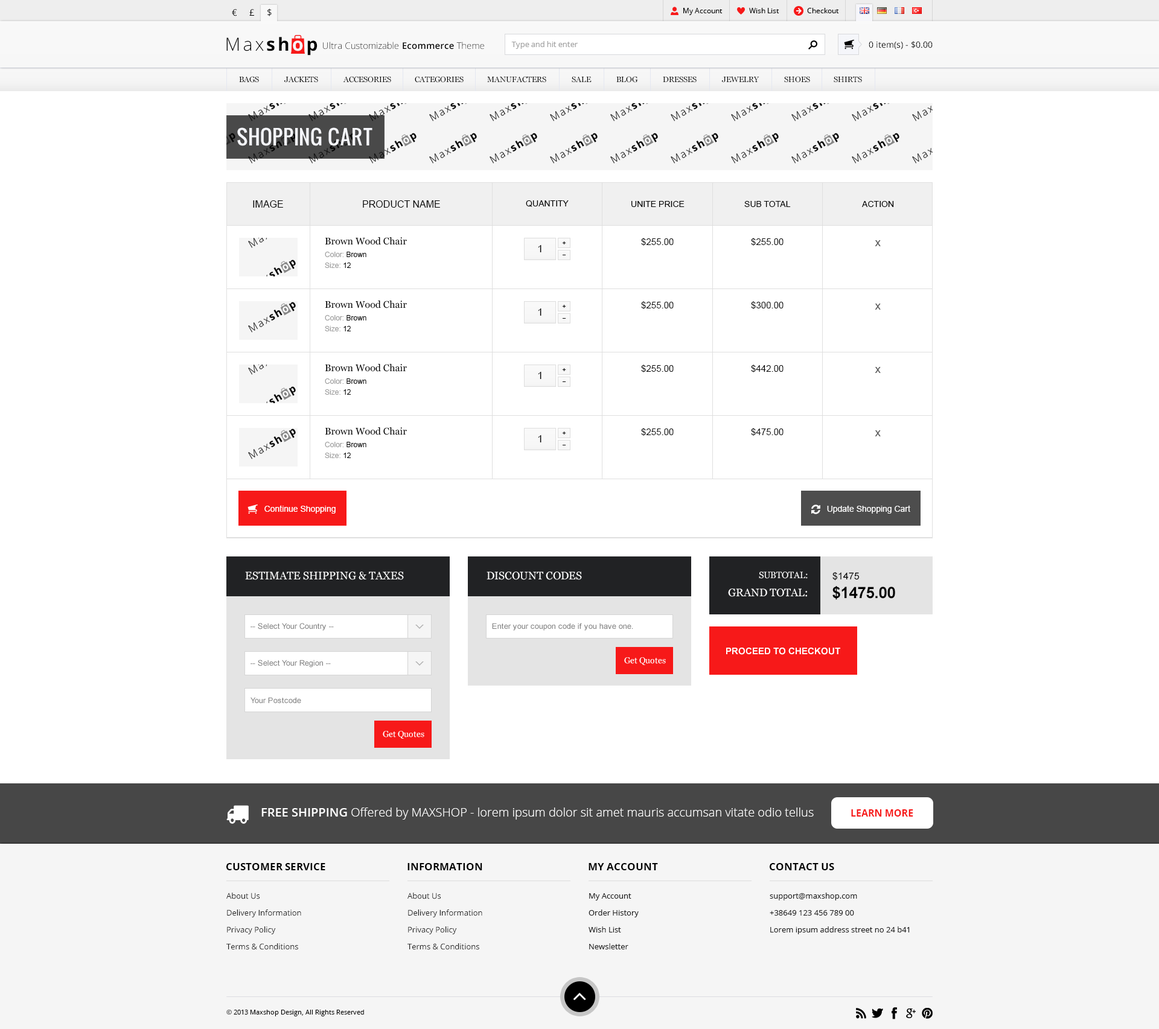
<style>
.page{position:relative;width:1159px;height:1029px;background:#ffffff}
.page>*{position:absolute;margin:0}
.t1{font:9.1px "OpenSans";color:#000000}
.t2{font:7.2px "OpenSans";color:#000000}
.t3{font:18.1px "OpenSans-Light";letter-spacing:0.14em;color:#000000}
.t4{font:18.1px "OpenSans-Bold";letter-spacing:0.14em;color:#000000}
.t5{font:18.1px "OpenSans-Bold";letter-spacing:0.14em;color:#f6f6fa}
.t6{font:9.1px "OpenSans-Light";color:#000000}
.t7{font:9.1px "OpenSans-Semibold";color:#000000}
.t8{font:7.8px "OpenSans";color:#a2a2a2}
.t9{font:8.4px "OpenSans";color:#000000}
.t10{font:7.8px "Georgia";color:#000000;text-transform:uppercase}
.t11{font:19.9px "Oswald";color:#f5f6fb}
.t12{font:9.7px "ArialMT";color:#000000;text-transform:uppercase}
.t13{font:8.4px "ArialMT";color:#000000;text-transform:uppercase}
.t14{font:9.7px "Georgia";color:#000000}
.t15{font:10.3px "ArialMT";color:#000000}
.t16{font:7.2px "ArialMT";color:#000000}
.t17{font:9.1px "ArialMT";color:#000000}
.t18{font:11.5px "ArialMT";color:#595959}
.t19{font:7.2px/10.9px "ArialMT";color:#9d9d9d}
.t20{font:7.2px/10.9px "ArialMT";color:#000000}
.t21{font:8.4px "ArialMT";color:#ffffff}
.t22{font:10.9px "Georgia";color:#ffffff;text-transform:uppercase}
.t23{font:9.1px "Georgia";color:#ffffff;text-transform:uppercase}
.t24{font:9.7px "ArialMT";color:#000000}
.t25{font:15.7px "Arial-BoldMT";color:#000000}
.t26{font:7.8px "ArialMT";color:#808080}
.t27{font:9.1px "Arial-BoldMT";color:#ffffff;text-transform:uppercase}
.t28{font:8.4px "Georgia";color:#ffffff}
.t29{font:12.1px "OpenSans-Light";color:#ffffff}
.t30{font:12.1px "OpenSans-Semibold";color:#ffffff}
.t31{font:9.7px "OpenSans-Bold";color:#f71919;text-transform:uppercase}
.t32{font:10.3px "OpenSans-Bold";color:#000000;text-transform:uppercase}
.t33{font:7.8px/16.9px "OpenSans";color:#1c1c1c}
.t34{font:6.6px "OpenSans";color:#000000}
</style>
<div class="page">
<p class="t1" style="left:232px;top:8px;width:40px;height:8px">€     £     $</p>
<p class="t2" style="left:683px;top:8px;width:39px;height:7px">My Account</p>
<p class="t2" style="left:749px;top:8px;width:30px;height:5px">Wish List</p>
<p class="t2" style="left:807px;top:8px;width:32px;height:5px">Checkout</p>
<p class="t3" style="left:226px;top:37px;width:91px;height:19px">Max<span class="t4">sh</span><span class="t5">o</span><span class="t4">p</span></p>
<p class="t6" style="left:323px;top:42px;width:161px;height:7px">Ultra Customizable <span class="t7">Ecommerce</span> Theme</p>
<p class="t8" style="left:511px;top:41px;width:67px;height:8px">Type and hit enter</p>
<p class="t9" style="left:868px;top:41px;width:64px;height:8px">0 item(s) - $0.00</p>
<p class="t10" style="left:239px;top:76px;width:623px;height:7px">BAGS              Jackets              ACCESORIES             CATEGORIES             Manufacters              Sale              Blog              Dresses              Jewelry              SHOES             SHirts</p>
<p class="t11" style="left:237px;top:127px;width:135px;height:19px">SHOPPING CART</p>
<p class="t12" style="left:253px;top:200px;width:30px;height:8px">Image</p>
<p class="t12" style="left:363px;top:200px;width:77px;height:8px">Product Name</p>
<p class="t13" style="left:526px;top:200px;width:43px;height:7px">Quantity</p>
<p class="t13" style="left:631px;top:201px;width:53px;height:6px">Unite Price</p>
<p class="t13" style="left:744px;top:201px;width:47px;height:6px">Sub Total</p>
<p class="t13" style="left:862px;top:201px;width:32px;height:6px">Action</p>
<p class="t14" style="left:325px;top:237px;width:82px;height:8px">Brown Wood Chair</p>
<p class="t15" style="left:538px;top:245px;width:3px;height:7px">1</p>
<p class="t16" style="left:562px;top:241px;width:4px;height:3px">+</p>
<p class="t17" style="left:641px;top:238px;width:33px;height:8px">$255.00</p>
<p class="t17" style="left:751px;top:238px;width:32px;height:8px">$255.00</p>
<p class="t18" style="left:875px;top:240px;width:6px;height:6px">x</p>
<p class="t19" style="left:325px;top:252px;width:41px;height:16px">Color: <span class="t20">Brown<br></span>Size: <span class="t20">12</span></p>
<p class="t14" style="left:325px;top:300px;width:82px;height:8px">Brown Wood Chair</p>
<p class="t16" style="left:562px;top:305px;width:4px;height:3px">+</p>
<p class="t17" style="left:641px;top:301px;width:33px;height:8px">$255.00</p>
<p class="t17" style="left:751px;top:301px;width:32px;height:8px">$300.00</p>
<p class="t18" style="left:875px;top:304px;width:6px;height:6px">x</p>
<p class="t19" style="left:325px;top:315px;width:41px;height:16px">Color: <span class="t20">Brown<br></span>Size: <span class="t20">12</span></p>
<p class="t15" style="left:538px;top:308px;width:3px;height:8px">1</p>
<p class="t14" style="left:325px;top:363px;width:82px;height:9px">Brown Wood Chair</p>
<p class="t17" style="left:641px;top:365px;width:33px;height:7px">$255.00</p>
<p class="t17" style="left:751px;top:365px;width:32px;height:7px">$442.00</p>
<p class="t15" style="left:538px;top:372px;width:3px;height:7px">1</p>
<p class="t16" style="left:562px;top:368px;width:4px;height:3px">+</p>
<p class="t18" style="left:875px;top:367px;width:6px;height:6px">x</p>
<p class="t19" style="left:325px;top:378px;width:41px;height:17px">Color: <span class="t20">Brown<br></span>Size: <span class="t20">12</span></p>
<p class="t14" style="left:325px;top:427px;width:82px;height:8px">Brown Wood Chair</p>
<p class="t15" style="left:538px;top:435px;width:3px;height:7px">1</p>
<p class="t16" style="left:562px;top:432px;width:4px;height:3px">+</p>
<p class="t17" style="left:641px;top:428px;width:33px;height:8px">$255.00</p>
<p class="t17" style="left:751px;top:428px;width:32px;height:8px">$475.00</p>
<p class="t18" style="left:875px;top:430px;width:6px;height:6px">x</p>
<p class="t19" style="left:325px;top:442px;width:41px;height:16px">Color: <span class="t20">Brown<br></span>Size: <span class="t20">12</span></p>
<p class="t21" style="left:264px;top:505px;width:72px;height:9px">Continue Shopping</p>
<p class="t21" style="left:827px;top:505px;width:83px;height:9px">Update Shopping Cart</p>
<p class="t22" style="left:245px;top:572px;width:159px;height:8px">Estimate Shipping &amp; Taxes</p>
<p class="t22" style="left:486px;top:572px;width:96px;height:8px">Discount Codes</p>
<p class="t23" style="left:759px;top:572px;width:49px;height:7px">Subtotal:</p>
<p class="t24" style="left:832px;top:572px;width:27px;height:9px">$1475</p>
<p class="t22" style="left:728px;top:588px;width:79px;height:9px">Grand total:</p>
<p class="t25" style="left:832px;top:586px;width:63px;height:14px">$1475.00</p>
<p class="t26" style="left:250px;top:623px;width:84px;height:8px">-- Select Your Country --</p>
<p class="t26" style="left:492px;top:623px;width:141px;height:8px">Enter your coupon code if you have one.</p>
<p class="t27" style="left:726px;top:648px;width:114px;height:7px">Proceed to Checkout</p>
<p class="t26" style="left:250px;top:660px;width:81px;height:8px">-- Select Your Region --</p>
<p class="t28" style="left:624px;top:657px;width:42px;height:8px">Get Quotes</p>
<p class="t26" style="left:250px;top:697px;width:51px;height:6px">Your Postcode</p>
<p class="t28" style="left:383px;top:731px;width:41px;height:8px">Get Quotes</p>
<p class="t29" style="left:261px;top:808px;width:553px;height:12px"><span class="t30">FREE SHIPPING </span>Offered by MAXSHOP - lorem ipsum dolor sit amet mauris accumsan vitate odio tellus</p>
<p class="t31" style="left:851px;top:809px;width:62px;height:8px">Learn more</p>
<p class="t32" style="left:226px;top:863px;width:99px;height:7px">Customer Service</p>
<p class="t32" style="left:407px;top:863px;width:75px;height:7px">Information</p>
<p class="t32" style="left:588px;top:863px;width:70px;height:7px">My Account</p>
<p class="t32" style="left:770px;top:863px;width:64px;height:7px">Contact us</p>
<p class="t33" style="left:226px;top:893px;width:75px;height:57px">About Us<br>Delivery Information<br>Privacy Policy<br>Terms &amp; Conditions</p>
<p class="t33" style="left:407px;top:893px;width:75px;height:57px">About Us<br>Delivery Information<br>Privacy Policy<br>Terms &amp; Conditions</p>
<p class="t33" style="left:588px;top:893px;width:51px;height:56px">My Account<br>Order History<br>Wish List<br>Newsletter</p>
<p class="t33" style="left:770px;top:893px;width:140px;height:41px">support@maxshop.com<br>+38649 123 456 789 00<br>Lorem ipsum address street no 24 b41</p>
<p class="t34" style="left:226px;top:1010px;width:138px;height:6px">© 2013 Maxshop Design, All Rights Reserved</p>
</div>
